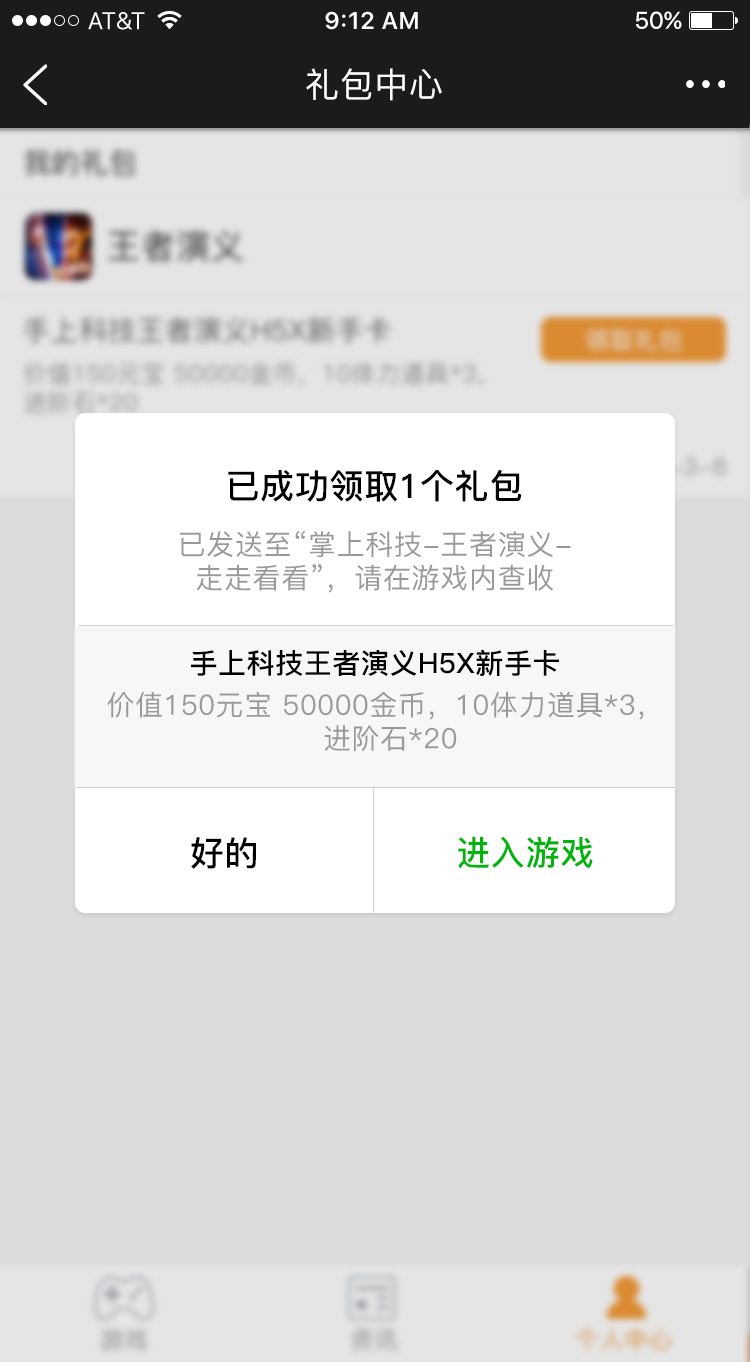
<style>
.page{position:relative;width:750px;height:1362px;background:#dbdbdb}
.page>*{position:absolute;margin:0}
.t1{font:34px "PingFang-SC-Medium";letter-spacing:0.02em;color:#ffffff}
.t2{font:34px "PingFang-SC-Bold";letter-spacing:0.02em;color:#000000}
.t3{font:28px "PingFang-SC-Medium";letter-spacing:0.024em;color:#999999}
.t4{font:28px "PingFang-SC-Bold";letter-spacing:0.02em;color:#000000}
.t5{font:28px "PingFang-SC-Medium";letter-spacing:0.02em;color:#999999}
.t6{font:34px "PingFang-SC-Bold";letter-spacing:0.02em;color:#01b50d}
</style>
<div class="page">
<p class="t1" style="left:306px;top:68px;width:136px;height:33px">礼包中心</p>
<p class="t2" style="left:228px;top:469px;width:294px;height:33px">已成功领取1个礼包</p>
<p class="t3" style="left:180px;top:531px;width:391px;height:62px;text-align:center">已发送至“掌上科技-王者演义-<br>走走看看”，请在游戏内查收</p>
<p class="t4" style="left:191px;top:649px;width:368px;height:27px">手上科技王者演义H5X新手卡</p>
<p class="t5" style="left:107px;top:691px;width:537px;height:60px;text-align:center">价值150元宝 50000金币，10体力道具*3，<br> 进阶石*20</p>
<p class="t2" style="left:191px;top:837px;width:65px;height:32px">好的</p>
<p class="t6" style="left:458px;top:836px;width:135px;height:33px">进入游戏</p>
</div>
